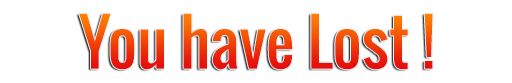
<style>
.page{position:relative;width:512px;height:83px;background:#ffffff}
.page>*{position:absolute;margin:0}
.t1{font:62.8px "Oswald-Regular"}
</style>
<div class="page">
<p class="t1" style="left:79px;top:13px;width:354px;height:57px">You have Lost !</p>
</div>
